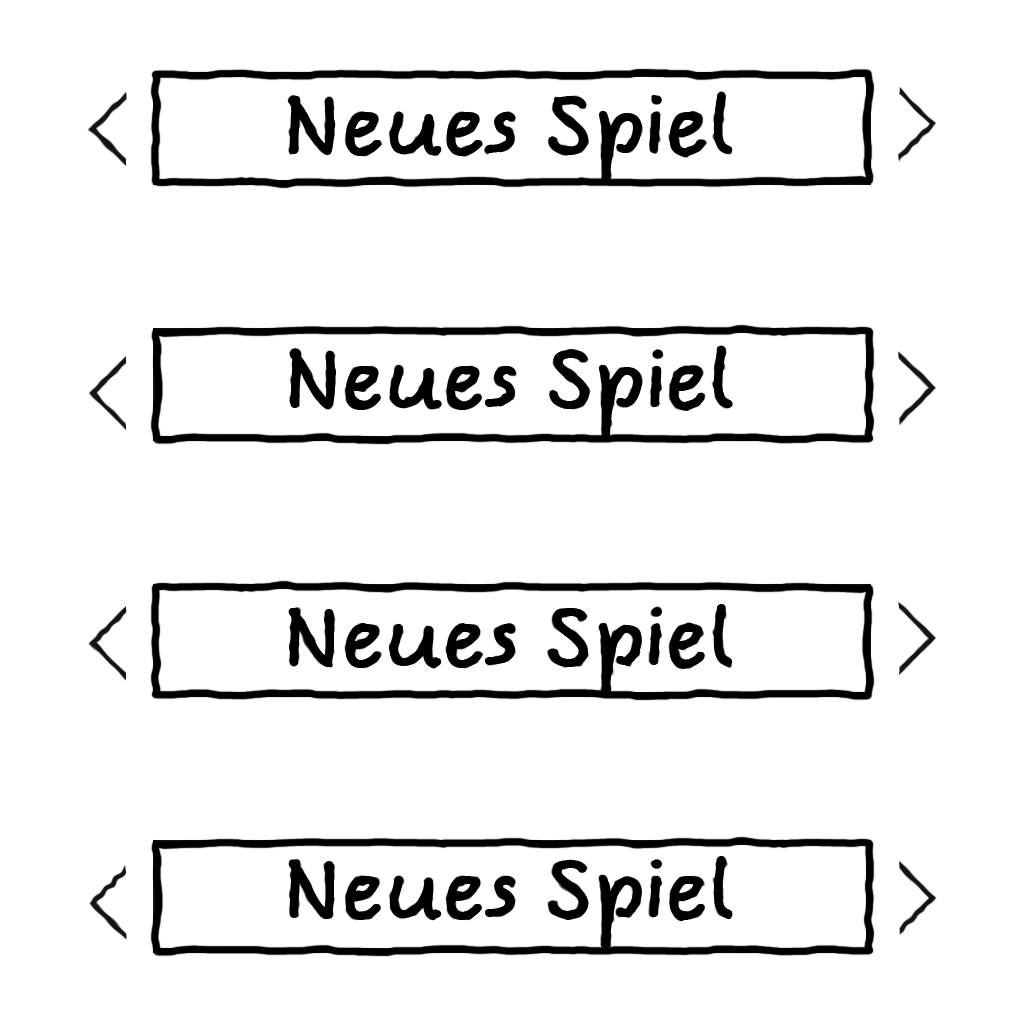
<style>
.page{position:relative;width:1024px;height:1024px;background:#ffffff}
.page>*{position:absolute;margin:0}
.t1{font:78.1px "ComicJensFreePro";color:#000000;scale:1.13 1}
.t2{font:78.4px "ComicJensFreePro";color:#000000;scale:1.13 1}
</style>
<div class="page">
<p class="t1" style="left:288px;top:92px;width:445px;height:92px">Neues Spiel</p>
<p class="t2" style="left:289px;top:346px;width:444px;height:92px">Neues Spiel</p>
<p class="t1" style="left:288px;top:604px;width:445px;height:92px">Neues Spiel</p>
<p class="t1" style="left:288px;top:856px;width:445px;height:92px">Neues Spiel</p>
</div>
